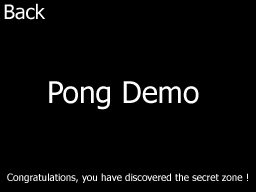
<style>
.page{position:relative;width:256px;height:192px;background:#000000}
.page>*{position:absolute;margin:0}
.t1{font:20px "Tahoma";color:#ffffff}
.t2{font:30px "Tahoma";color:#ffffff}
.t3{font:10px "Tahoma";color:#ffffff}
</style>
<div class="page">
<p class="t1" style="left:4px;top:3px;width:42px;height:17px">Back</p>
<p class="t2" style="left:49px;top:81px;width:150px;height:29px">Pong Demo</p>
<p class="t3" style="left:7px;top:173px;width:241px;height:10px">Congratulations, you have discovered the secret zone !</p>
</div>
